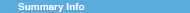
<style>
.page{position:relative;width:190px;height:13px;background:#5babdc}
.page>*{position:absolute;margin:0}
.t1{font:10px "Helvetica-Bold";color:#f9ffff}
</style>
<div class="page">
<p class="t1" style="left:18px;top:3px;width:67px;height:9px">Summary Info</p>
</div>
